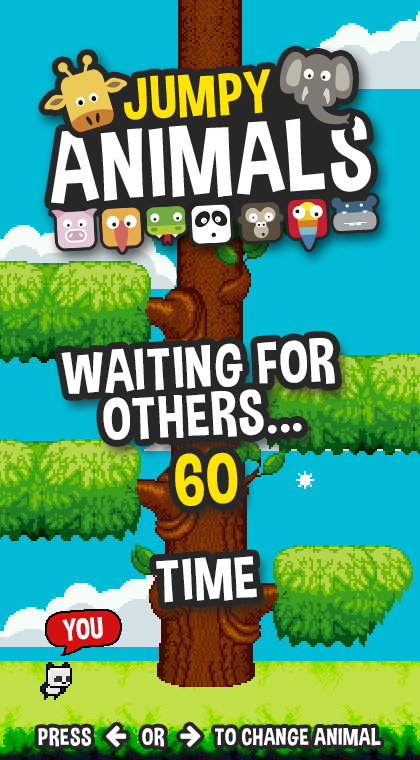
<style>
.page{position:relative;width:420px;height:760px;background:#01bbd6}
.page>*{position:absolute;margin:0}
.t1{font:60px/48px "DimboRegular";letter-spacing:0.025em;color:#ffffff;text-transform:uppercase}
.t2{font:72px "DimboRegular";letter-spacing:0.025em;color:#ffe400;text-transform:uppercase}
.t3{font:60px "DimboRegular";letter-spacing:0.025em;color:#ffffff;text-transform:uppercase}
.t4{font:30px "DimboRegular";letter-spacing:0.025em;color:#ffffff;text-transform:uppercase;scale:0.97 1}
.t5{font:24px "DimboRegular";letter-spacing:0.025em;color:#ffffff;text-transform:uppercase}
</style>
<div class="page">
<p class="t1" style="left:61px;top:338px;width:274px;height:102px;text-align:center;rotate:-3deg">WAITING FOR<br>OTHERs...</p>
<p class="t2" style="left:175px;top:452px;width:63px;height:54px;rotate:-3deg">60</p>
<p class="t3" style="left:156px;top:556px;width:101px;height:47px;rotate:-3deg">Time</p>
<p class="t4" style="left:62px;top:616px;width:41px;height:25px;rotate:-4deg">YOU</p>
<p class="t5" style="left:38px;top:727px;width:343px;height:20px">PRESS          OR          TO CHANGE animal</p>
</div>
